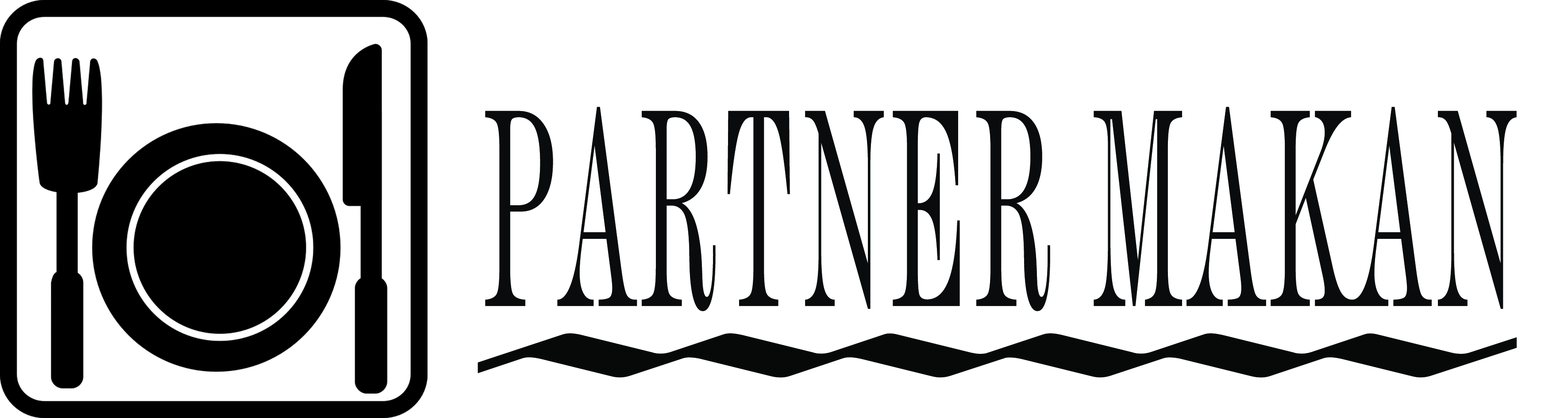
<style>
.page{position:relative;width:1568px;height:418px;background:#ffffff}
.page>*{position:absolute;margin:0}
.t1{font:294.6px "DeVinneBT-Text";letter-spacing:0.06em;color:#090b0b;scale:0.37 1}
</style>
<div class="page">
<p class="t1" style="left:485px;top:107px;width:1032px;height:205px">PARTNER MAKAN</p>
</div>
